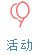
<style>
.page{position:relative;width:40px;height:55px;background:#ffffff}
.page>*{position:absolute;margin:0}
.t1{font:22.5px "SimSun";letter-spacing:0.1em;color:#4788b2;font-variant:small-caps}
</style>
<div class="page">
<p class="t1" style="left:7px;top:39px;width:25px;height:12px">活动</p>
</div>
